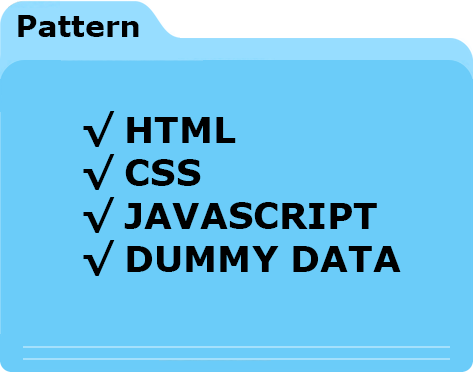
<style>
.page{position:relative;width:473px;height:372px;background:#6bccf9}
.page>*{position:absolute;margin:0}
.t1{font:30px "Verdana-Bold";color:#000000}
.t2{font:36px "Verdana-Bold";color:#000000}
</style>
<div class="page">
<p class="t1" style="left:18px;top:15px;width:121px;height:22px">Pattern</p>
<p class="t2" style="left:83px;top:111px;width:318px;height:165px">√ HTML<br>√ CSS<br>√ JAVASCRIPT<br>√ DUMMY DATA</p>
</div>
